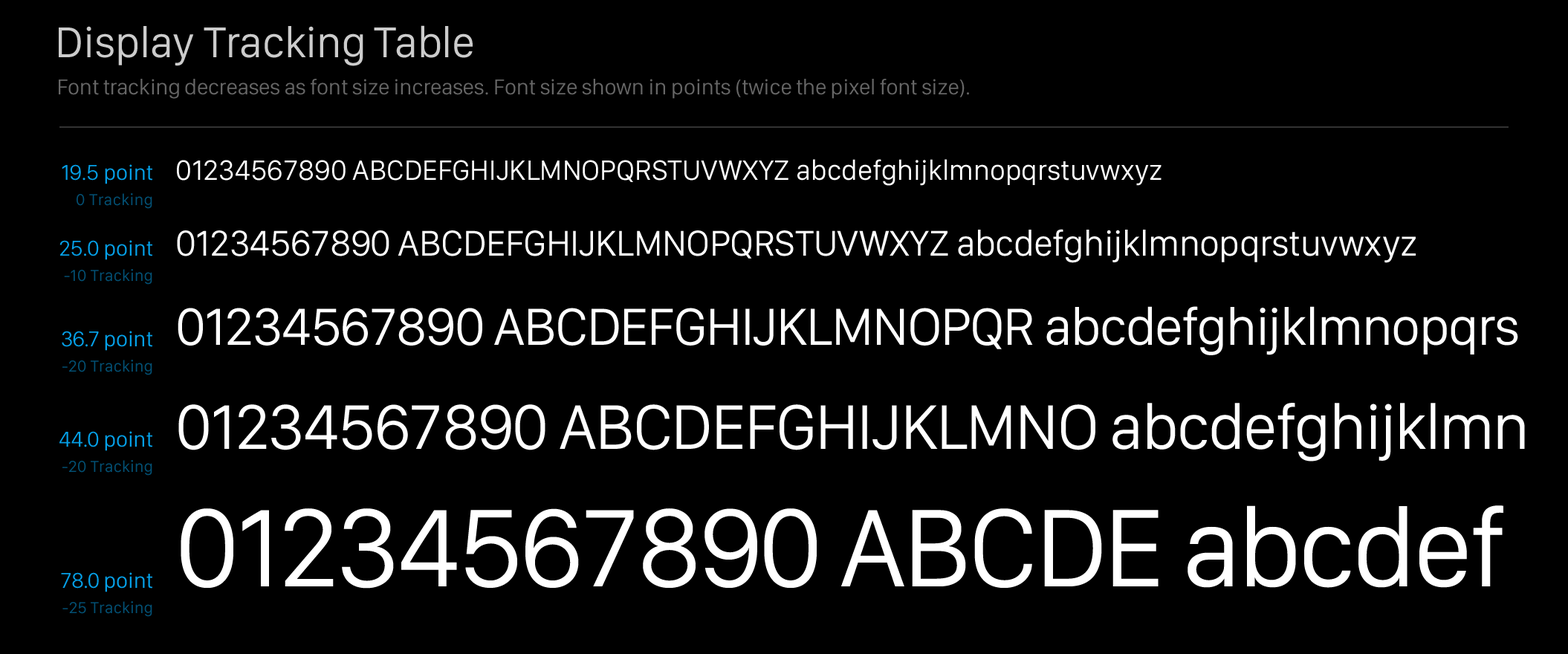
<style>
.page{position:relative;width:1568px;height:654px;background:#000000}
.page>*{position:absolute;margin:0}
.t1{font:44.6px "SanFranciscoDisplay-Regular";letter-spacing:-0.005em;color:#cccccc}
.t2{font:22.3px "SanFranciscoDisplay-Regular";letter-spacing:-0.005em;color:#666666}
.t3{font:29px "SanFranciscoDisplay-Regular";color:#ffffff}
.t4{font:22.3px "SanFranciscoDisplay-Regular";color:#05a0e8}
.t5{font:16.3px "SanFranciscoText-Regular";color:#035074}
.t6{font:37.2px "SanFranciscoDisplay-Regular";letter-spacing:-0.01em;color:#ffffff}
.t7{font:22.3px "SanFranciscoDisplay-Regular";letter-spacing:-0.01em;color:#05a0e8}
.t8{font:16.3px "SanFranciscoText-Regular";letter-spacing:-0.01em;color:#035074}
.t9{font:54.2px "SanFranciscoDisplay-Regular";letter-spacing:-0.02em;color:#ffffff}
.t10{font:22.3px "SanFranciscoDisplay-Regular";letter-spacing:-0.02em;color:#05a0e8}
.t11{font:65.4px "SanFranciscoDisplay-Regular";letter-spacing:-0.02em;color:#ffffff}
.t12{font:114.4px "SanFranciscoDisplay-Regular";letter-spacing:-0.025em;color:#ffffff}
.t13{font:22.3px "SanFranciscoDisplay-Regular";letter-spacing:-0.025em;color:#05a0e8}
</style>
<div class="page">
<p class="t1" style="left:59px;top:25px;width:414px;height:41px">Display Tracking Table</p>
<p class="t2" style="left:59px;top:79px;width:910px;height:20px">Font tracking decreases as font size increases. Font size shown in points (twice the pixel font size).</p>
<p class="t3" style="left:177px;top:159px;width:985px;height:27px">01234567890 ABCDEFGHIJKLMNOPQRSTUVWXYZ abcdefghijklmnopqrstuvwxyz</p>
<p class="t4" style="left:62px;top:164px;width:90px;height:20px">19.5 point</p>
<p class="t5" style="left:77px;top:193px;width:75px;height:16px">0 Tracking</p>
<p class="t6" style="left:177px;top:229px;width:1239px;height:34px">01234567890 ABCDEFGHIJKLMNOPQRSTUVWXYZ abcdefghijklmnopqrstuvwxyz</p>
<p class="t4" style="left:59px;top:240px;width:93px;height:20px"><span class="t7">25.0</span> point</p>
<p class="t8" style="left:64px;top:269px;width:88px;height:16px">-10 Tracking</p>
<p class="t9" style="left:178px;top:306px;width:1340px;height:49px">01234567890 ABCDEFGHIJKLMNOPQR abcdefghijklmnopqrs</p>
<p class="t4" style="left:62px;top:331px;width:90px;height:20px"><span class="t10">36.7</span> point</p>
<p class="t8" style="left:62px;top:360px;width:90px;height:15px">-20 Tracking</p>
<p class="t11" style="left:178px;top:403px;width:1347px;height:58px">01234567890 ABCDEFGHIJKLMNO abcdefghijklmn</p>
<p class="t4" style="left:59px;top:431px;width:93px;height:20px"><span class="t10">44.0</span> point</p>
<p class="t8" style="left:62px;top:460px;width:90px;height:16px">-20 Tracking</p>
<p class="t12" style="left:181px;top:505px;width:1322px;height:84px">01234567890 ABCDE abcdef</p>
<p class="t4" style="left:61px;top:572px;width:91px;height:20px"><span class="t13">78.0</span> point</p>
<p class="t8" style="left:62px;top:601px;width:90px;height:16px">-25 Tracking</p>
</div>
